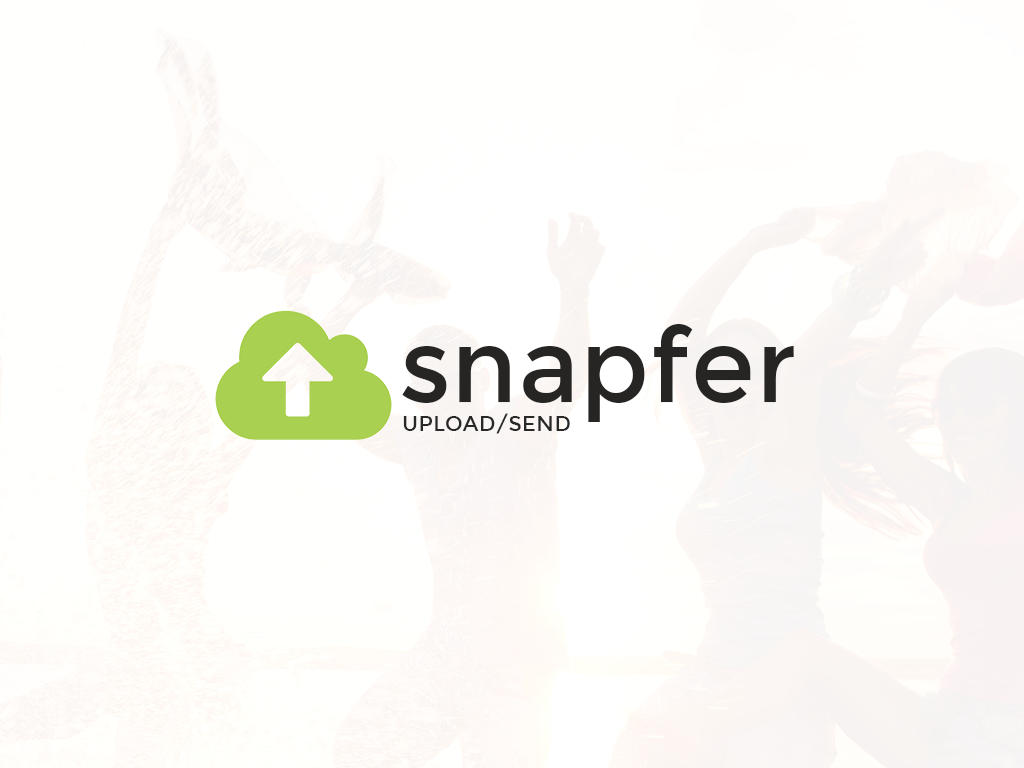
<style>
.page{position:relative;width:1024px;height:768px;background:#fffffe}
.page>*{position:absolute;margin:0}
.t1{font:102.9px "Montserrat-Regular";letter-spacing:0.01em;color:#262524}
.t2{font:21.4px "Montserrat-Regular";letter-spacing:0.01em;color:#282828}
</style>
<div class="page">
<p class="t1" style="left:402px;top:324px;width:392px;height:98px">snapfer</p>
<p class="t2" style="left:403px;top:413px;width:167px;height:21px">UPLOAD/SEND</p>
</div>
